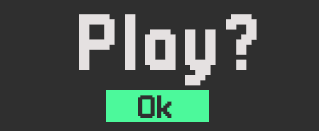
<style>
.page{position:relative;width:319px;height:131px;background:#2f2f2f}
.page>*{position:absolute;margin:0}
.t1{font:81px "Pixellari";color:#e5e1e1}
.t2{font:33px "Pixellari";color:#2f2f2f}
</style>
<div class="page">
<p class="t1" style="left:79px;top:14px;width:178px;height:72px">Play?</p>
<p class="t2" style="left:138px;top:95px;width:34px;height:23px">Ok</p>
</div>
